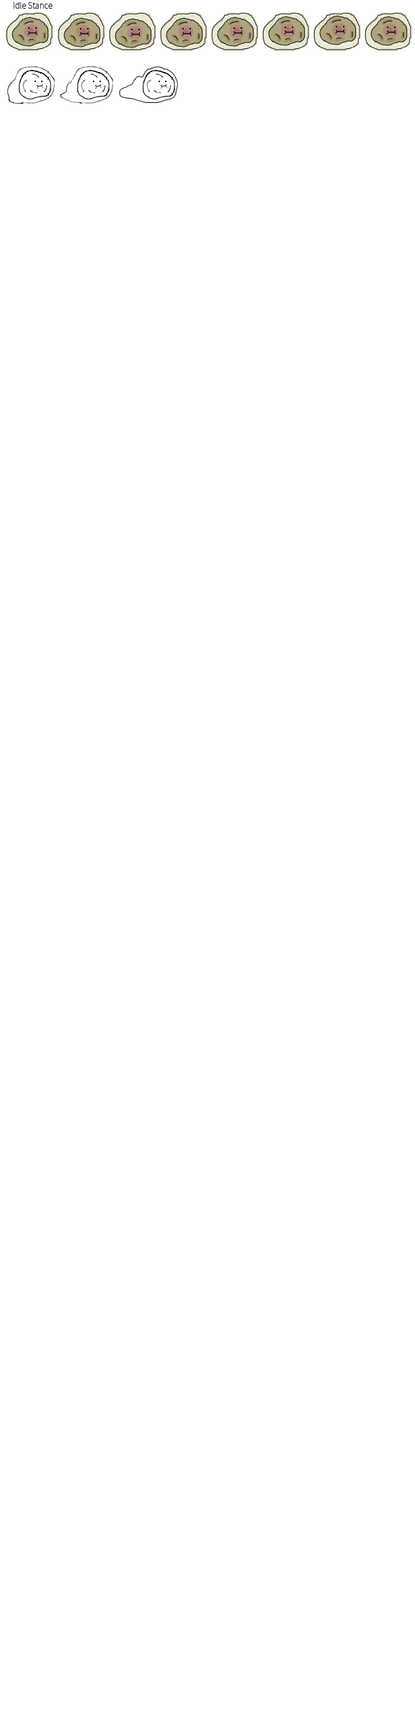
<style>
.page{position:relative;width:415px;height:1728px;background:#ffffff}
.page>*{position:absolute;margin:0}
.t1{font:9px "SourceSansPro-ExtraLight";color:#070303}
</style>
<div class="page">
<p class="t1" style="left:13px;top:2px;width:40px;height:7px">Idle Stance</p>
</div>
